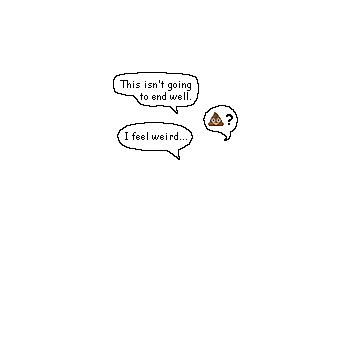
<style>
.page{position:relative;width:360px;height:360px;background:#ffffff}
.page>*{position:absolute;margin:0}
.t1{font:10px/13px "ComicSansMS";color:#000000}
.t2{font:14px "ComicSansMS-Bold";color:#000000}
.t3{font:10px "ComicSansMS";color:#000000}
</style>
<div class="page">
<p class="t1" style="left:120px;top:80px;width:71px;height:20px;text-align:right">This isn’t going<br>to end well.</p>
<p class="t2" style="left:226px;top:114px;width:7px;height:11px">?</p>
<p class="t3" style="left:125px;top:132px;width:62px;height:8px">I feel weird...</p>
</div>
